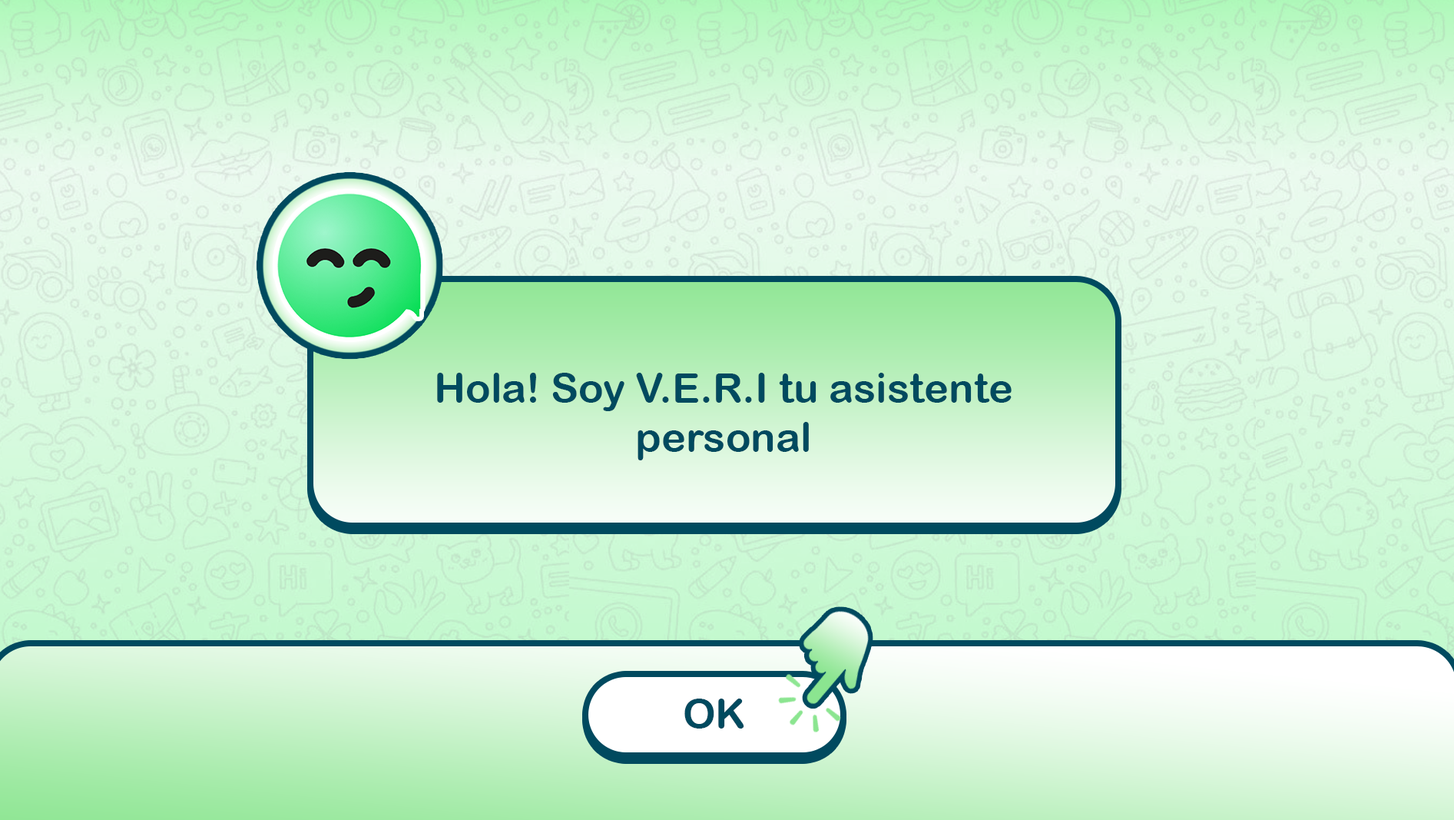
<style>
.page{position:relative;width:1454px;height:820px}
.page>*{position:absolute;margin:0}
.t1{font:41.5px "ArialRoundedMTBold";color:#004a5f}
</style>
<div class="page">
<p class="t1" style="left:437px;top:373px;width:575px;height:87px;text-align:center">Hola! Soy V.E.R.I tu asistente<br>personal</p>
<p class="t1" style="left:685px;top:698px;width:60px;height:30px">OK</p>
</div>
